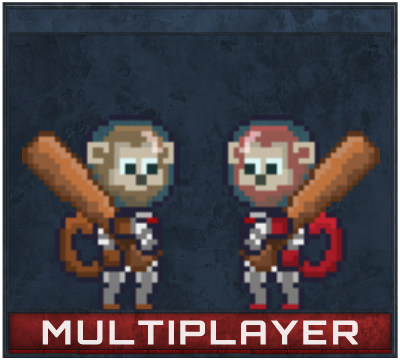
<style>
.page{position:relative;width:400px;height:360px}
.page>*{position:absolute;margin:0}
.t1{font:33.2px "Orbitron-Bold";letter-spacing:0.1em;color:#ffffff;font-weight:bold}
</style>
<div class="page">
<p class="t1" style="left:42px;top:320px;width:316px;height:25px;opacity:0.9">MULTIPLAYER</p>
</div>
